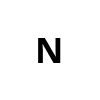
<style>
.page{position:relative;width:100px;height:100px;background:#ffffff}
.page>*{position:absolute;margin:0}
.t1{font:35px "OpenSans-Bold";color:#000000}
</style>
<div class="page">
<p class="t1" style="left:38px;top:38px;width:23px;height:25px">N</p>
</div>
